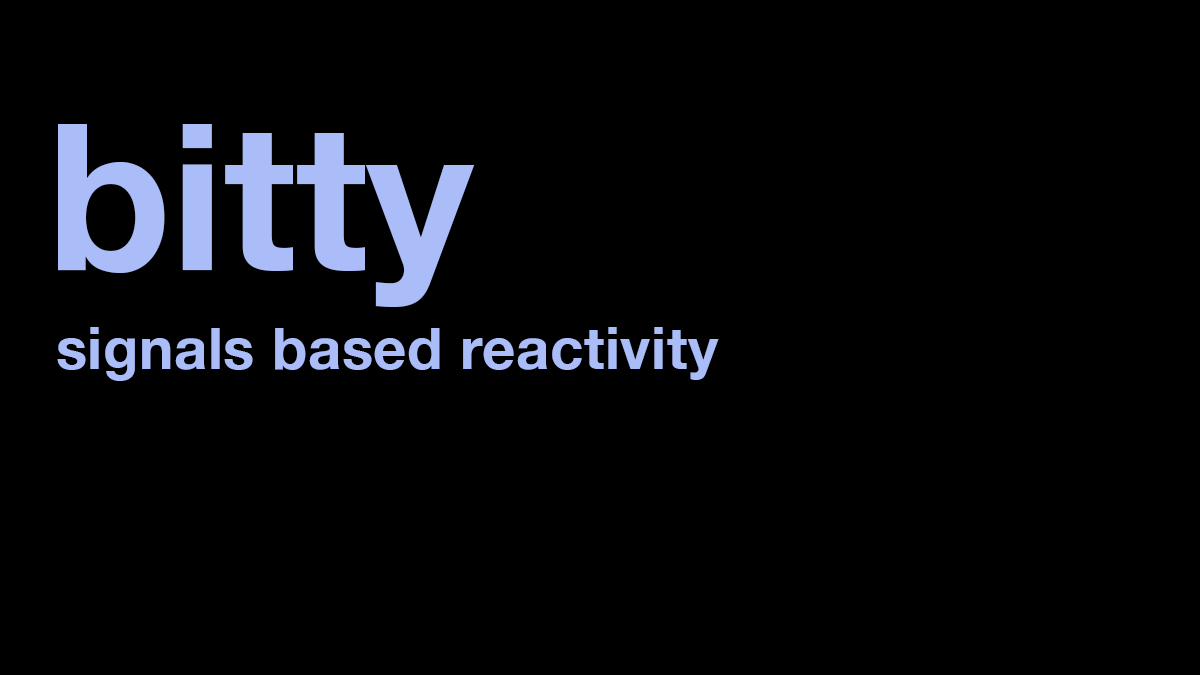
<style>
.page{position:relative;width:1200px;height:675px;background:#000000}
.page>*{position:absolute;margin:0}
.t1{font:204px "HelveticaNeue-Bold";color:#abbdf8}
.t2{font:58px "HelveticaNeue-Bold";letter-spacing:0.01em;color:#abbdf8}
</style>
<div class="page">
<p class="t1" style="left:58px;top:124px;width:417px;height:183px">bitty</p>
<p class="t2" style="left:57px;top:327px;width:662px;height:54px">signals based reactivity</p>
</div>
